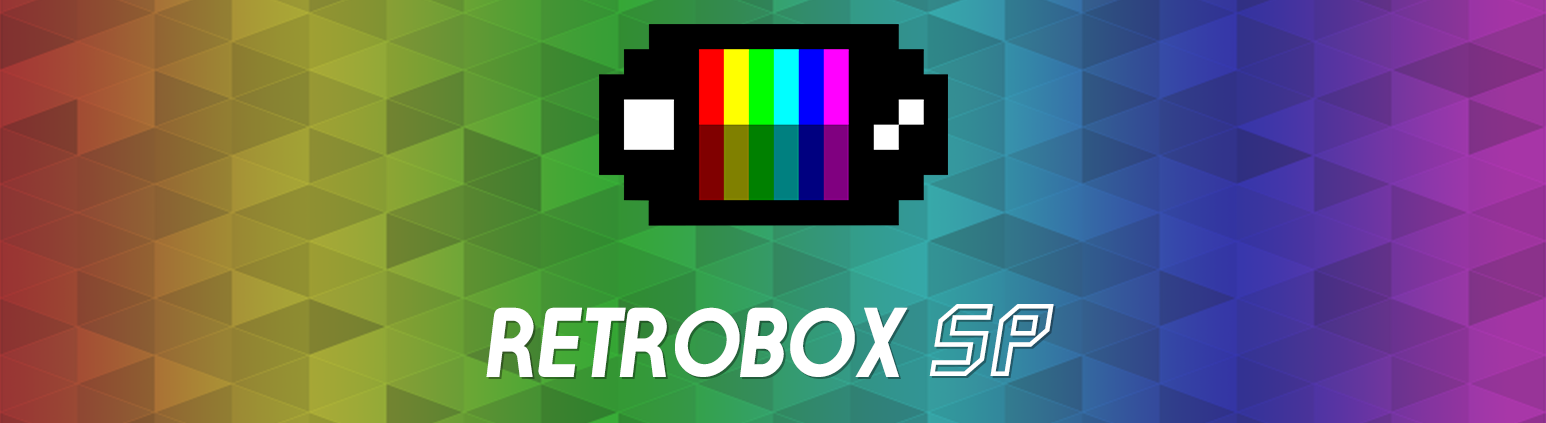
<style>
.page{position:relative;width:1546px;height:423px}
.page>*{position:absolute;margin:0}
.t1{font:72px "NiseGameGear";color:#ffffff}
.t2{font:82px "NiseGameGear";color:#ffffff}
</style>
<div class="page">
<p class="t1" style="left:929px;top:304px;width:125px;height:72px">sp</p>
<p class="t2" style="left:486px;top:307px;width:422px;height:70px">RETROBOX</p>
</div>
